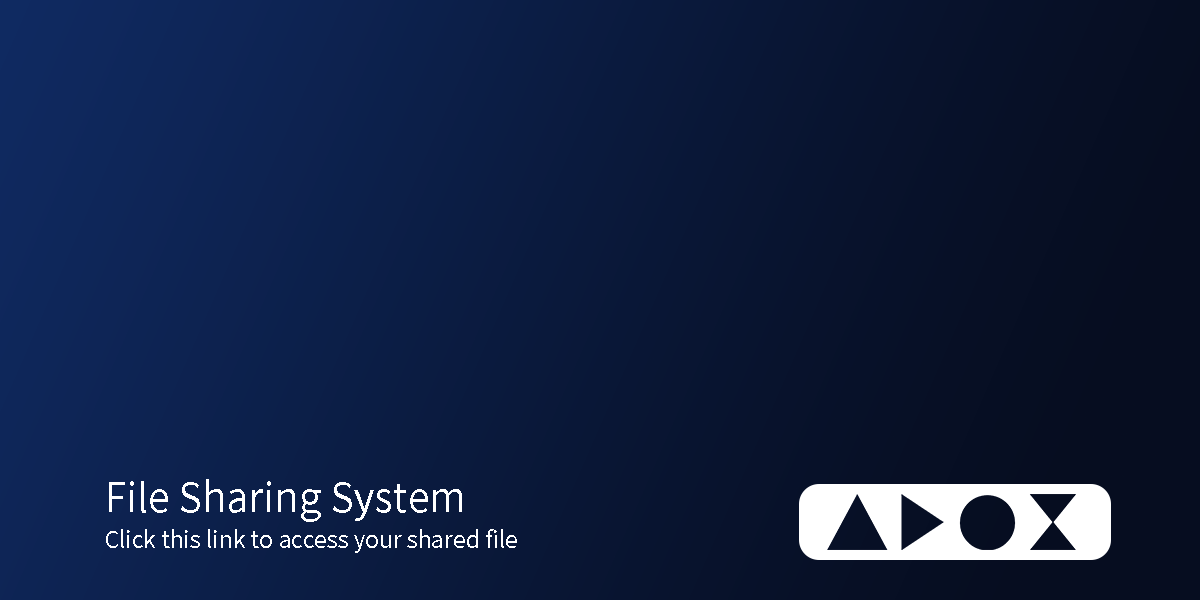
<style>
.page{position:relative;width:1200px;height:600px}
.page>*{position:absolute;margin:0}
.t1{font:39.9px "NotoSansCJKhk-Regular";color:#ffffff}
.t2{font:23px "NotoSansCJKhk-Regular";color:#ffffff}
</style>
<div class="page">
<p class="t1" style="left:109px;top:479px;width:353px;height:43px">File Sharing System</p>
<p class="t2" style="left:106px;top:529px;width:411px;height:24px">Click this link to access your shared file</p>
</div>
